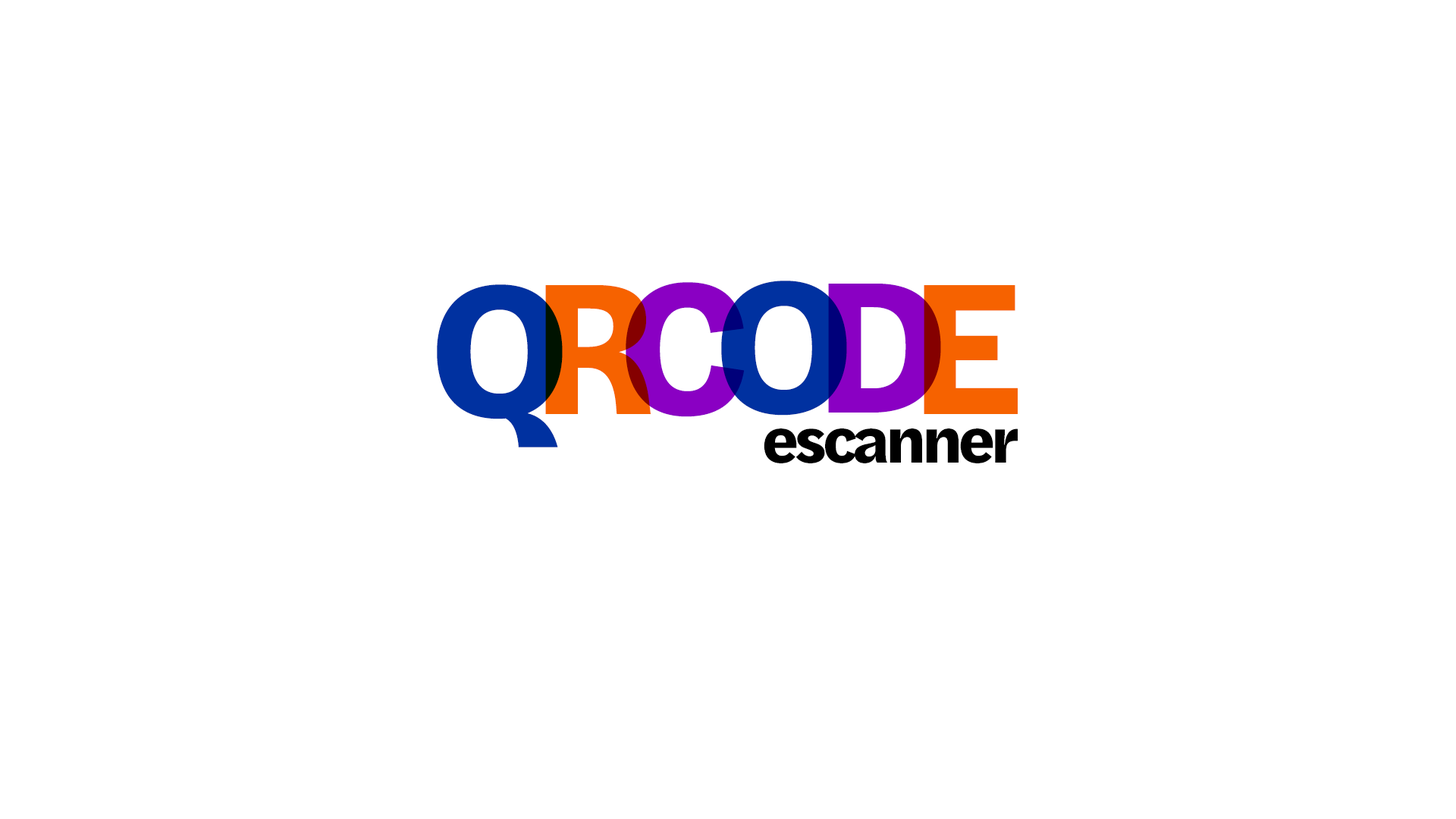
<style>
.page{position:relative;width:1456px;height:819px;background:#ffffff}
.page>*{position:absolute;margin:0}
.t1{font:194.5px "HalyardText-Bold";letter-spacing:0.001em;color:#0031a0}
.t2{font:194.5px "HalyardText-Bold";letter-spacing:0.001em;color:#f66200}
.t3{font:194.5px "HalyardText-Bold";letter-spacing:0.001em;color:#8a00c3}
.t4{font:66.1px "HalyardText-Bold";letter-spacing:-0.059em;color:#000000}
</style>
<div class="page">
<p class="t1" style="left:721px;top:281px;width:126px;height:135px">O</p>
<p class="t1" style="left:437px;top:284px;width:126px;height:163px">Q</p>
<p class="t2" style="left:545px;top:285px;width:106px;height:129px">R</p>
<p class="t3" style="left:626px;top:282px;width:118px;height:135px">C</p>
<p class="t3" style="left:828px;top:284px;width:113px;height:129px">D</p>
<p class="t2" style="left:924px;top:285px;width:94px;height:129px">E</p>
<p class="t4" style="left:764px;top:428px;width:254px;height:35px">escanner</p>
</div>
